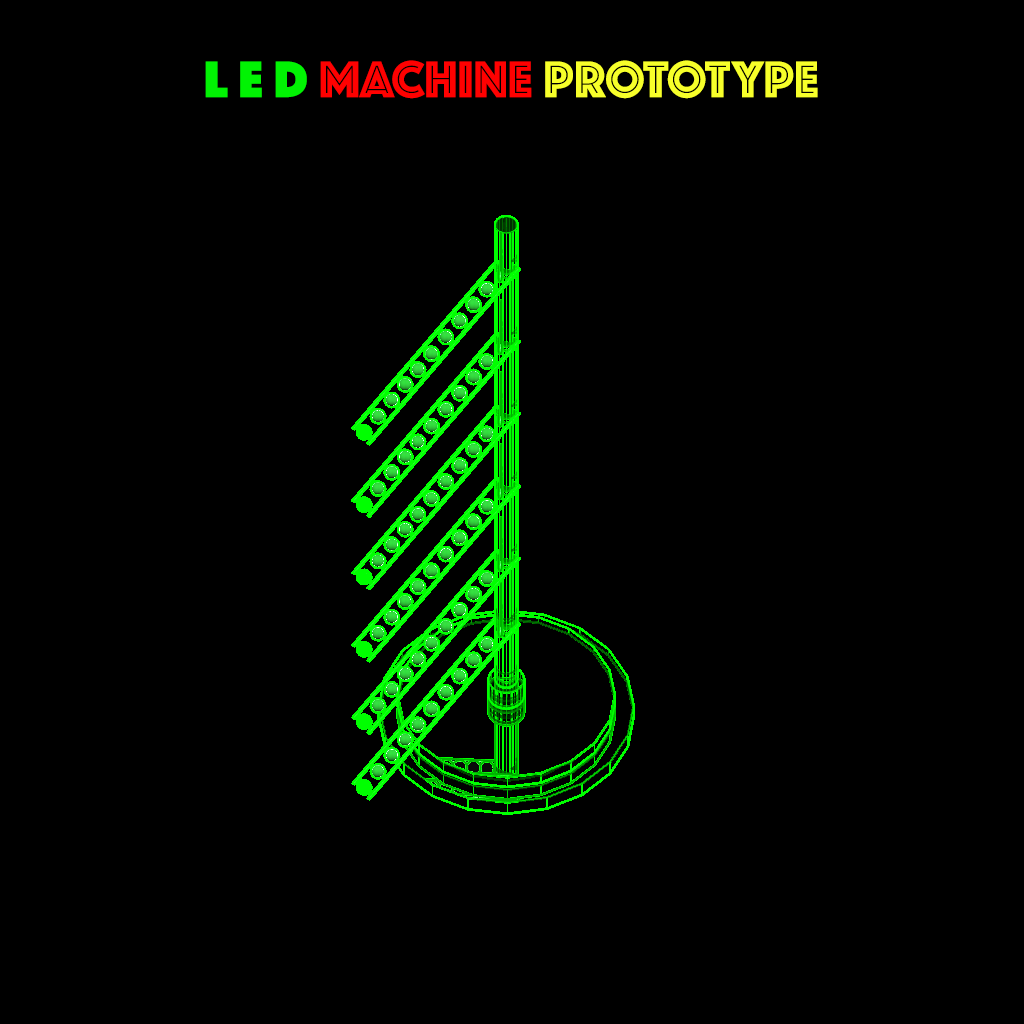
<style>
.page{position:relative;width:1024px;height:1024px;background:#000000}
.page>*{position:absolute;margin:0}
.t1{font:53.8px "Phosphate-Inline";color:#f7ff2a}
.t2{font:53.8px "Phosphate-Solid";letter-spacing:0.2em;color:#01f303}
.t3{font:53.8px "Phosphate-Inline";color:#ff0101}
</style>
<div class="page">
<p class="t1" style="left:205px;top:60px;width:613px;height:39px"><span class="t2">LED</span><span class="t3">MACHINE </span>PROTOTYPE</p>
</div>
